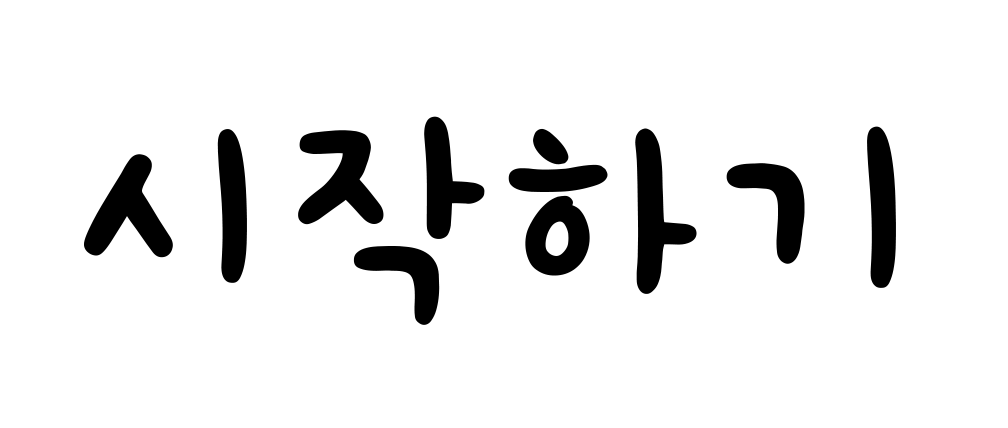
<style>
.page{position:relative;width:1008px;height:428px;background:#ffffff}
.page>*{position:absolute;margin:0}
.t1{font:250px "godoMaum";letter-spacing:0.1em;color:#000000}
</style>
<div class="page">
<p class="t1" style="left:84px;top:116px;width:812px;height:209px">시작하기</p>
</div>
